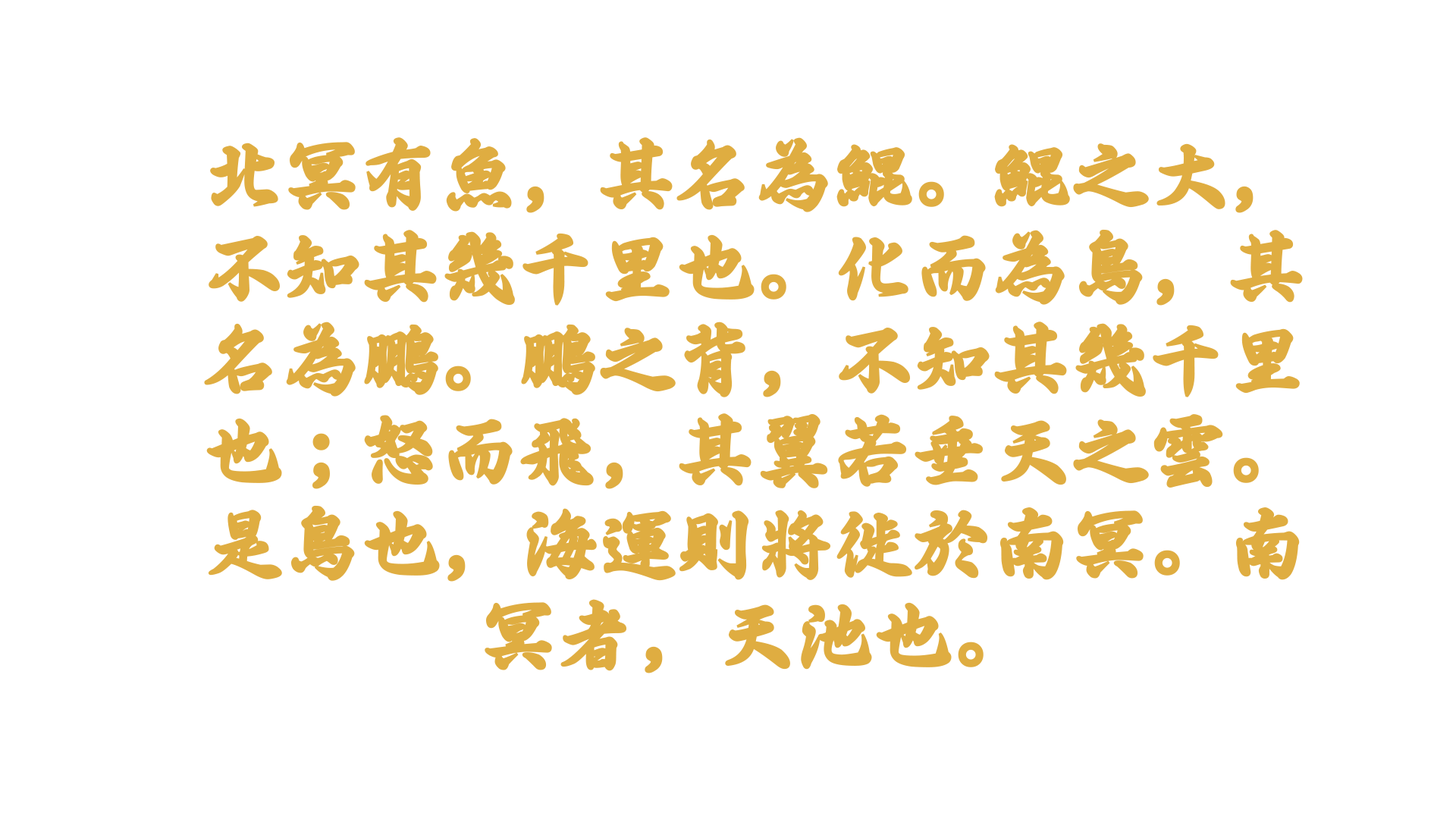
<style>
.page{position:relative;width:1456px;height:819px;background:#ffffff}
.page>*{position:absolute;margin:0}
.t1{font:76.7px "´ºÁª±ê×¼ÐÐÊéÌå";color:#dfad41;font-weight:bold}
</style>
<div class="page">
<p class="t1" style="left:204px;top:137px;width:1099px;height:536px;text-align:center">北冥有魚，其名為鯤。鯤之大，不知其幾千里也。化而為鳥，其名為鵬。鵬之背，不知其幾千里也；怒而飛，其翼若垂天之雲。是鳥也，海運則將徙於南冥。南冥者，天池也。</p>
</div>
